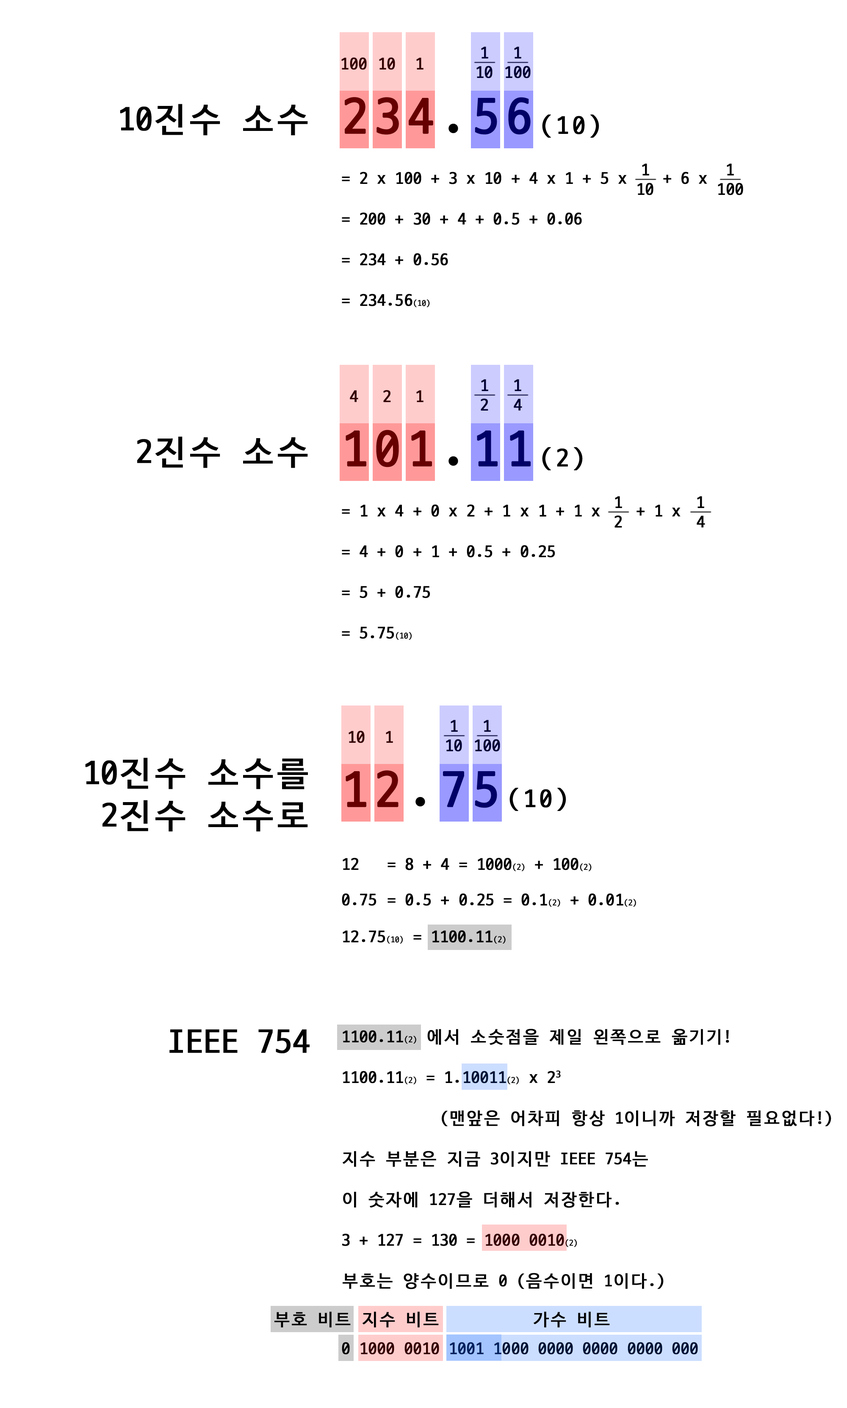
<style>
.page{position:relative;width:847px;height:1408px;background:#ffffff}
.page>*{position:absolute;margin:0}
.t1{font:16.9px "D2Coding";color:#000033;font-weight:bold}
.t2{font:16.9px "D2Coding";color:#330000;font-weight:bold}
.t3{font:50.8px "D2Coding";letter-spacing:0.12em;font-weight:bold}
.t4{font:25.4px "D2Coding";letter-spacing:0.12em;font-weight:bold}
.t5{font:33.9px "D2Coding";color:#000000;font-weight:bold}
.t6{font:16.9px/13.6px "D2Coding";color:#000000;font-weight:bold}
.t7{font:8.5px/13.6px "D2Coding";color:#000000;font-weight:bold}
.t8{font:16.9px "D2Coding";color:#000000;font-weight:bold}
.t9{font:33.9px/42.4px "D2Coding";color:#000000;font-weight:bold}
.t10{font:8.5px "D2Coding";color:#000000;font-weight:bold}
</style>
<div class="page">
<p class="t1" style="left:481px;top:47px;width:7px;height:11px">1</p>
<p class="t1" style="left:514px;top:47px;width:7px;height:11px">1</p>
<p class="t2" style="left:341px;top:57px;width:26px;height:13px">100</p>
<p class="t2" style="left:379px;top:57px;width:16px;height:13px">10</p>
<p class="t2" style="left:416px;top:58px;width:8px;height:11px">1</p>
<p class="t1" style="left:477px;top:66px;width:16px;height:12px">10</p>
<p class="t1" style="left:505px;top:66px;width:26px;height:12px">100</p>
<p class="t3" style="left:345px;top:97px;width:254px;height:41px">234.56<span class="t4">(10)</span></p>
<p class="t5" style="left:120px;top:104px;width:188px;height:32px">10진수 소수</p>
<p class="t6" style="left:342px;top:172px;width:365px;height:135px">= 2 x 100 + 3 x 10 + 4 x 1 + 5 x    + 6 x<br><br><br>= 200 + 30 + 4 + 0.5 + 0.06<br><br><br>= 234 + 0.56<br><br><br>= 234.56<span class="t7">(10)</span></p>
<p class="t8" style="left:642px;top:164px;width:7px;height:11px">1</p>
<p class="t8" style="left:727px;top:164px;width:7px;height:11px">1</p>
<p class="t8" style="left:637px;top:183px;width:17px;height:12px">10</p>
<p class="t8" style="left:718px;top:183px;width:25px;height:12px">100</p>
<p class="t2" style="left:383px;top:390px;width:8px;height:12px">2</p>
<p class="t1" style="left:481px;top:379px;width:7px;height:12px">1</p>
<p class="t1" style="left:514px;top:379px;width:7px;height:12px">1</p>
<p class="t2" style="left:350px;top:390px;width:8px;height:12px">4</p>
<p class="t2" style="left:416px;top:390px;width:8px;height:12px">1</p>
<p class="t1" style="left:481px;top:398px;width:7px;height:12px">2</p>
<p class="t1" style="left:514px;top:399px;width:8px;height:11px">4</p>
<p class="t5" style="left:137px;top:436px;width:171px;height:32px">2진수 소수</p>
<p class="t3" style="left:346px;top:430px;width:237px;height:40px">101.11<span class="t4">(2)</span></p>
<p class="t8" style="left:615px;top:496px;width:7px;height:12px">1</p>
<p class="t8" style="left:697px;top:496px;width:7px;height:12px">1</p>
<p class="t6" style="left:342px;top:504px;width:339px;height:136px">= 1 x 4 + 0 x 2 + 1 x 1 + 1 x    + 1 x<br><br><br>= 4 + 0 + 1 + 0.5 + 0.25<br><br><br>= 5 + 0.75<br><br><br>= 5.75<span class="t7">(10)</span></p>
<p class="t8" style="left:615px;top:515px;width:7px;height:12px">2</p>
<p class="t8" style="left:697px;top:515px;width:8px;height:12px">4</p>
<p class="t1" style="left:451px;top:720px;width:7px;height:12px">1</p>
<p class="t1" style="left:484px;top:720px;width:7px;height:12px">1</p>
<p class="t2" style="left:349px;top:730px;width:16px;height:13px">10</p>
<p class="t2" style="left:386px;top:731px;width:7px;height:12px">1</p>
<p class="t1" style="left:446px;top:739px;width:16px;height:12px">10</p>
<p class="t1" style="left:475px;top:739px;width:25px;height:12px">100</p>
<p class="t9" style="left:85px;top:757px;width:223px;height:74px;text-align:right">10진수 소수를<br>2진수 소수로</p>
<p class="t3" style="left:346px;top:770px;width:220px;height:41px">12.75<span class="t4">(10)</span></p>
<p class="t8" style="left:343px;top:857px;width:249px;height:14px">12  = 8 + 4 = 1000<span class="t10">(2)</span> + 100<span class="t10">(2)</span></p>
<p class="t8" style="left:342px;top:893px;width:294px;height:13px">0.75 = 0.5 + 0.25 = 0.1<span class="t10">(2)</span> + 0.01<span class="t10">(2)</span></p>
<p class="t8" style="left:343px;top:930px;width:163px;height:13px">12.75<span class="t10">(10)</span> = 1100.11<span class="t10">(2)</span></p>
<p class="t5" style="left:169px;top:1029px;width:141px;height:24px">IEEE 754</p>
<p class="t6" style="left:342px;top:1028px;width:489px;height:326px">1100.11<span class="t7">(2)  </span>에서 소숫점을 제일 왼쪽으로 옮기기!<br><br><br>1100.11<span class="t7">(2)</span> = 1.10011<span class="t7">(2)</span> x 23<br><br><br>           (맨앞은 어차피 항상 1이니까 저장할 필요없다!)<br><br><br>지수 부분은 지금 3이지만 IEEE 754는<br><br><br>이 숫자에 127을 더해서 저장한다.<br><br><br>3 + 127 = 130 = 1000 0010<span class="t7">(2)</span><br><br><br>부호는 양수이므로 0 (음수이면 1이다.)<br><br><br><br><br>0 1000 0010 1001 1000 0000 0000 0000 000</p>
<p class="t8" style="left:274px;top:1311px;width:77px;height:16px">부호 비트</p>
<p class="t8" style="left:363px;top:1311px;width:76px;height:16px">지수 비트</p>
<p class="t8" style="left:534px;top:1311px;width:76px;height:16px">가수 비트</p>
</div>
